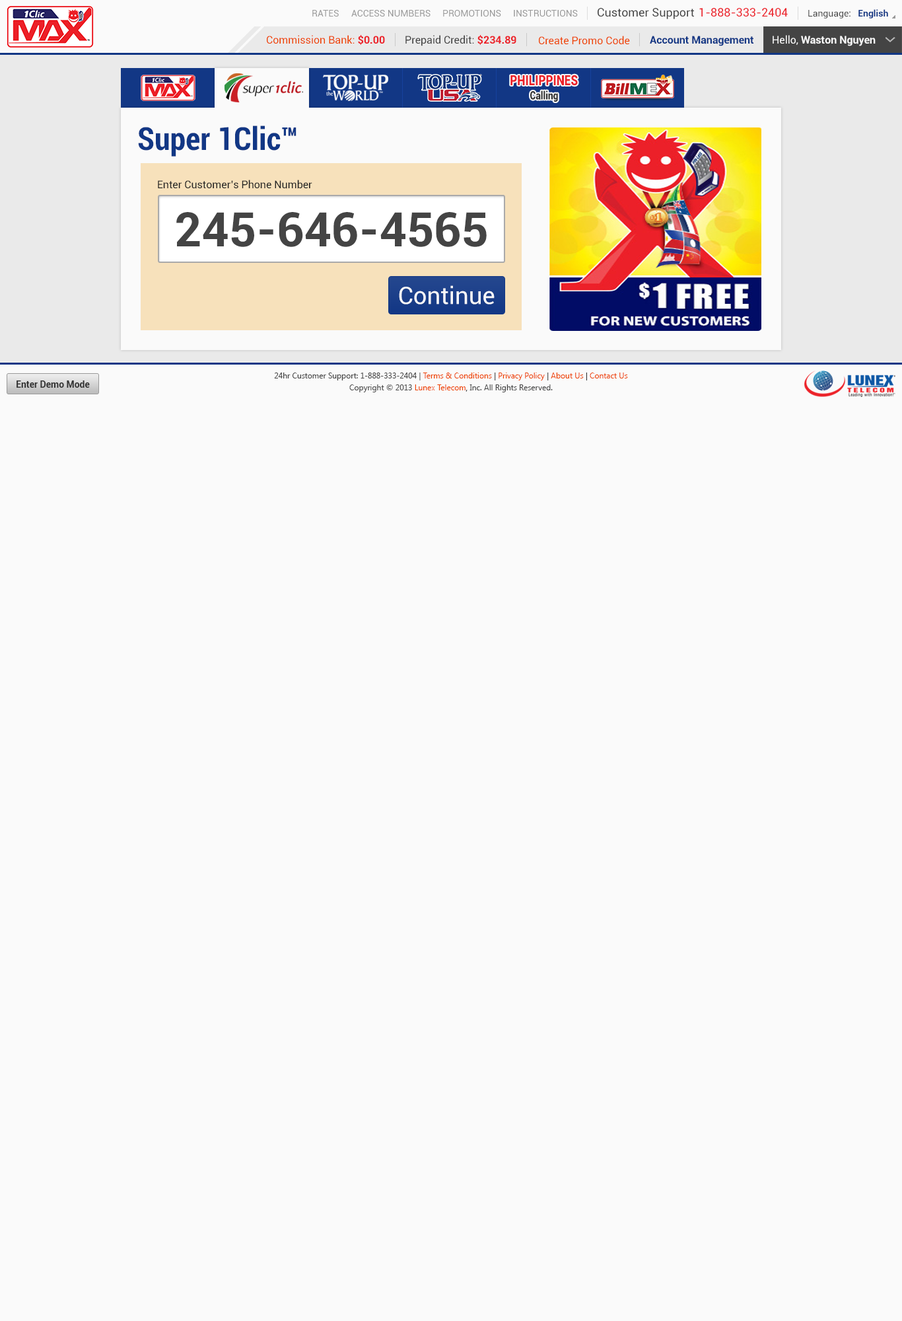
<style>
.page{position:relative;width:902px;height:1321px;background:#fafafa}
.page>*{position:absolute;margin:0}
.t1{font:9.2px "Roboto-Regular";color:#999999}
.t2{font:11.6px "Roboto-Regular";color:#444444}
.t3{font:11.6px "Roboto-Regular";color:#ec2029}
.t4{font:9.2px "Roboto-Regular";color:#444444}
.t5{font:9.2px "Roboto-Bold";color:#123785}
.t6{font:10.6px "Roboto-Regular";color:#ee4400}
.t7{font:10.6px "Roboto-Bold";color:#ec2028}
.t8{font:10.6px "Roboto-Regular";color:#444444}
.t9{font:10.6px "Roboto-Bold";color:#123785}
.t10{font:10.6px "Roboto-Bold";color:#fafafa}
.t11{font:10.6px "Roboto-Regular";color:#fafafa}
.t12{font:14.1px "Roboto-Black";color:#ec2028;scale:0.81 1}
.t13{font:11.3px "Roboto-Black";color:#333333;scale:0.81 1}
.t14{font:31.7px "Roboto-BoldCondensed";color:#123785}
.t15{font:10.6px "Roboto-Regular";color:#222222}
.t16{font:47.6px "Roboto-Bold";color:#444444}
.t17{font:23.9px "Roboto-Regular";color:#fafafa}
.t18{font:7.9px/11.9px "SegoeUI";color:#444444}
.t19{font:7.9px/11.9px "SegoeUI";color:#ee4400}
.t20{font:7.9px/11.9px "SegoeUI";color:#333333}
.t21{font:9.2px "Roboto-Bold";color:#333333}
</style>
<div class="page">
<p class="t1" style="left:312px;top:10px;width:27px;height:7px">RATES</p>
<p class="t1" style="left:351px;top:10px;width:80px;height:7px">ACCESS NUMBERS</p>
<p class="t1" style="left:443px;top:10px;width:58px;height:7px">PROMOTIONS</p>
<p class="t1" style="left:514px;top:10px;width:64px;height:7px">INSTRUCTIONS</p>
<p class="t2" style="left:598px;top:8px;width:96px;height:11px">Customer Support</p>
<p class="t3" style="left:700px;top:8px;width:88px;height:9px">1-888-333-2404</p>
<p class="t4" style="left:809px;top:9px;width:80px;height:9px">Language:   <span class="t5">English</span></p>
<p class="t6" style="left:267px;top:35px;width:118px;height:10px">Commission Bank: <span class="t7">$0.00</span></p>
<p class="t8" style="left:406px;top:35px;width:111px;height:11px">Prepaid Credit: <span class="t7">$234.89</span></p>
<p class="t6" style="left:539px;top:36px;width:91px;height:9px">Create Promo Code</p>
<p class="t9" style="left:650px;top:36px;width:104px;height:10px">Account Management</p>
<p class="t10" style="left:773px;top:35px;width:103px;height:11px"><span class="t11">Hello, </span>Waston Nguyen</p>
<p class="t12" style="left:511px;top:75px;width:67px;height:11px">PHILIPPINES</p>
<p class="t13" style="left:531px;top:91px;width:27px;height:11px">Calling</p>
<p class="t14" style="left:138px;top:126px;width:159px;height:31px">Super 1Clic™</p>
<p class="t15" style="left:158px;top:180px;width:154px;height:9px">Enter Customer’s Phone Number</p>
<p class="t16" style="left:176px;top:212px;width:311px;height:35px">245-646-4565</p>
<p class="t17" style="left:399px;top:285px;width:96px;height:20px">Continue</p>
<p class="t18" style="left:274px;top:373px;width:354px;height:19px;text-align:center">24hr Customer Support: 1-888-333-2404 | <span class="t19">Terms &amp; Conditions</span><span class="t20"> | </span><span class="t19">Privacy Policy</span><span class="t20"> | </span><span class="t19">About Us</span><span class="t20"> | </span><span class="t19">Contact Us<br></span>Copyright © 2013 <span class="t19">Lunex Telecom</span><span class="t20">,</span> Inc. All Rights Reserved.</p>
<p class="t21" style="left:17px;top:381px;width:73px;height:7px">Enter Demo Mode</p>
</div>
